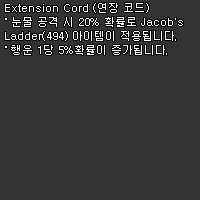
<style>
.page{position:relative;width:200px;height:200px;background:#333333}
.page>*{position:absolute;margin:0}
.t1{font:11px/14px "Dotum";color:#ffffff}
</style>
<div class="page">
<p class="t1" style="left:5px;top:3px;width:178px;height:52px">Extension Cord (연장 코드)<br>˚ 눈물 공격 시 20% 확률로 Jacob's <br>Ladder(494) 아이템이 적용됩니다.<br>˚ 행운 1당 5%확률이 증가됩니다.</p>
</div>
